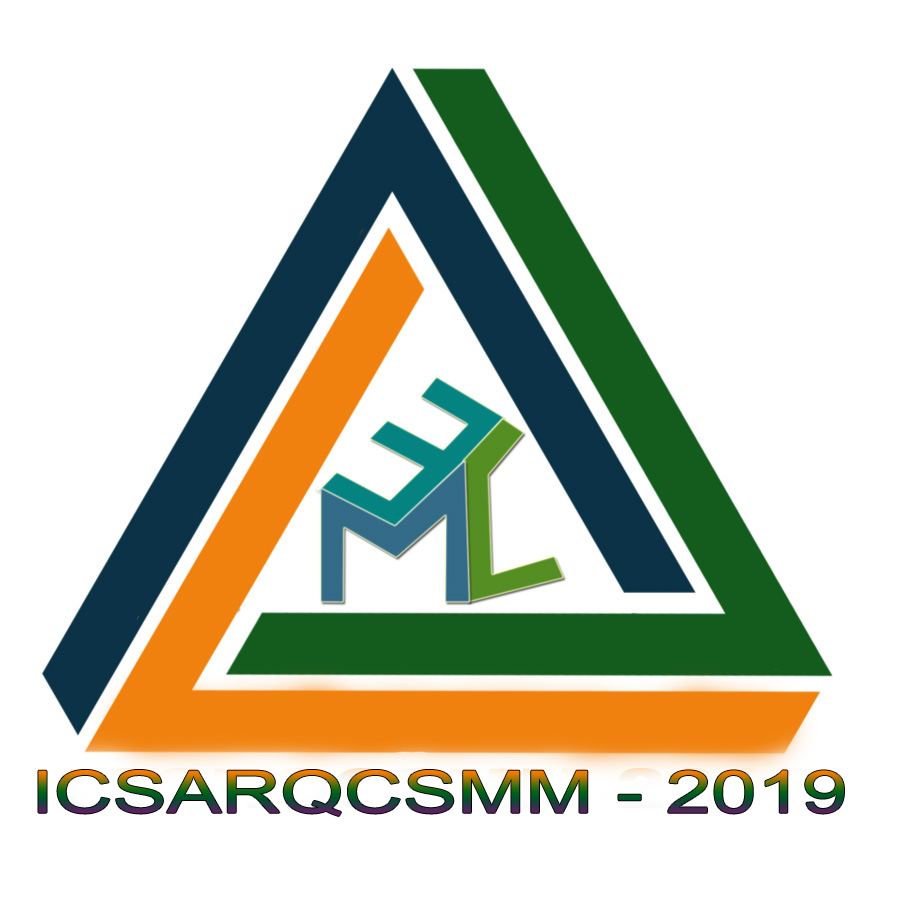
<style>
.page{position:relative;width:900px;height:900px;background:#ffffff}
.page>*{position:absolute;margin:0}
.t1{font:58.3px "ArialMT";scale:1.4 1}
</style>
<div class="page">
<p class="t1" style="left:38px;top:770px;width:806px;height:46px">ICSARQCSMM - 2019</p>
</div>
